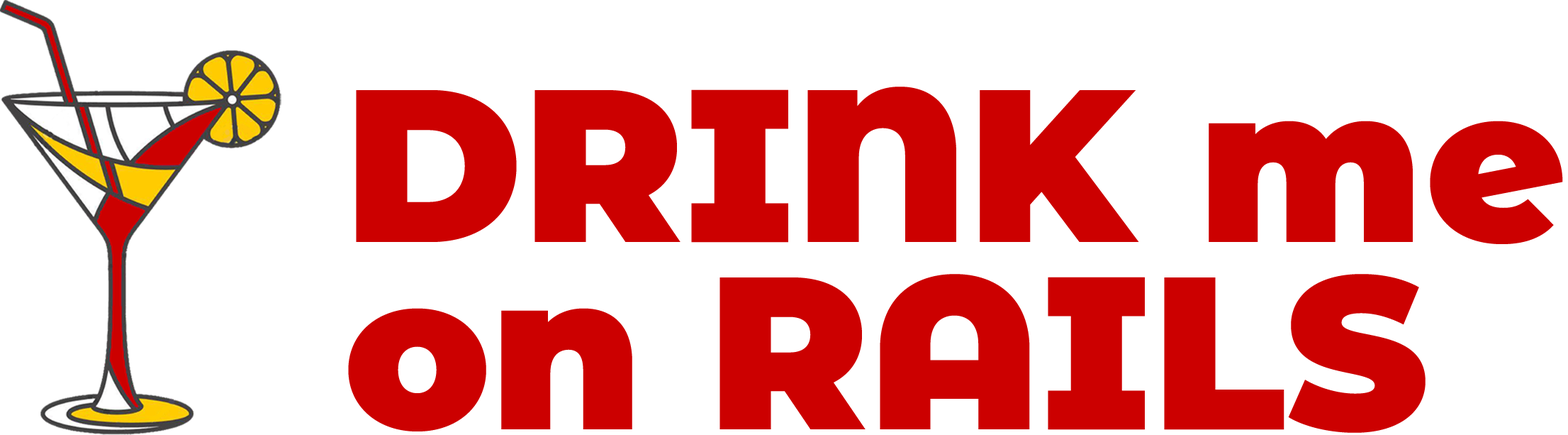
<style>
.page{position:relative;width:1568px;height:435px;background:#ffffff}
.page>*{position:absolute;margin:0}
.t1{font:216.6px/187.1px "MontserratAlternates-Black";color:#cc0000}
</style>
<div class="page">
<p class="t1" style="left:348px;top:86px;width:1215px;height:346px">DRINK me<br>on RAILS</p>
</div>
